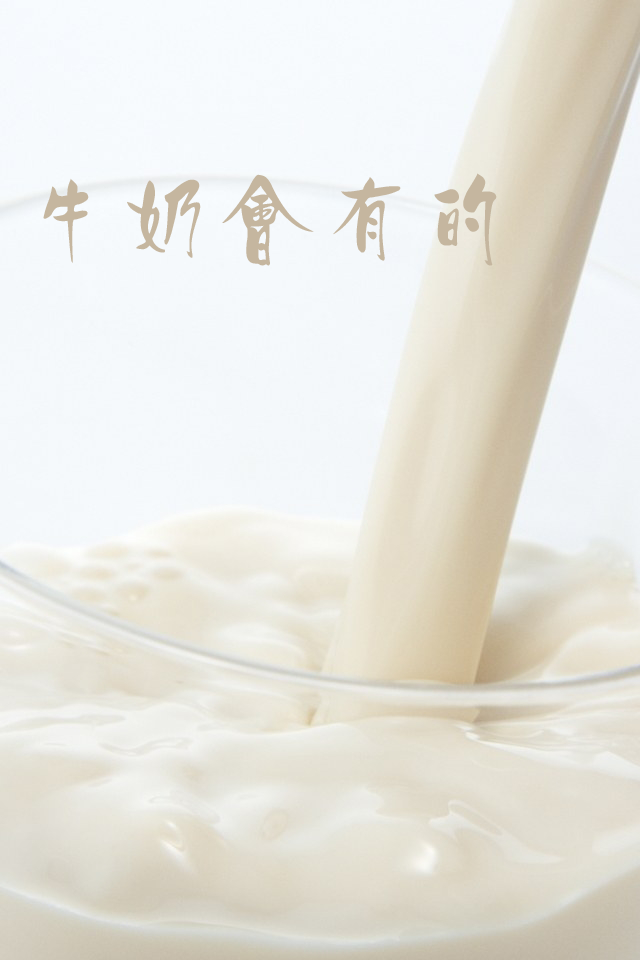
<style>
.page{position:relative;width:640px;height:960px}
.page>*{position:absolute;margin:0}
.t1{font:100px "¾­µä·±ÖÐ±ä Regular";color:#c5b69f}
</style>
<div class="page">
<p class="t1" style="left:43px;top:173px;width:454px;height:93px">牛奶会有的</p>
</div>
